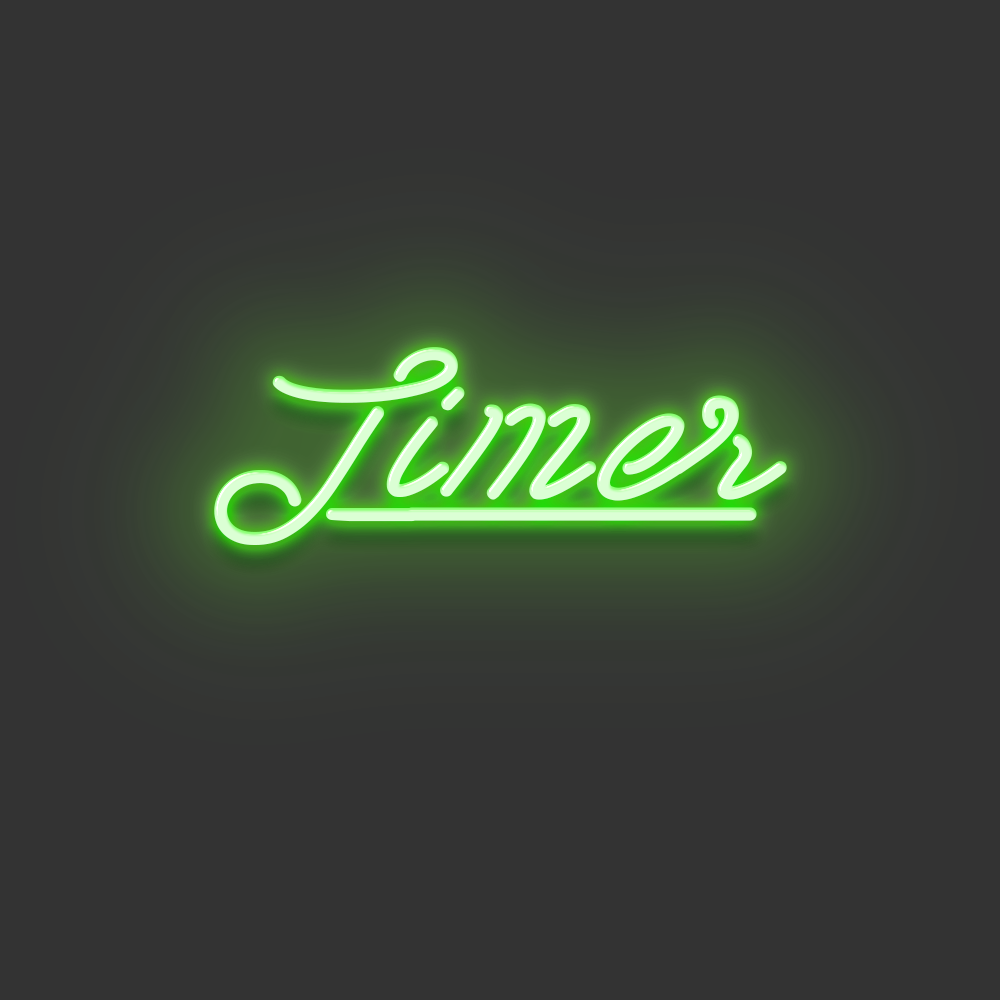
<style>
.page{position:relative;width:1000px;height:1000px;background:#333333}
.page>*{position:absolute;margin:0}
.t1{font:250px "LasEnterPersonalUseOnly";color:#dbffd4}
</style>
<div class="page">
<p class="t1" style="left:214px;top:347px;width:573px;height:198px">Timer</p>
</div>
